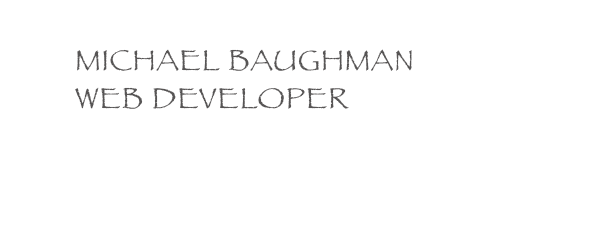
<style>
.page{position:relative;width:600px;height:250px;background:#ffffff}
.page>*{position:absolute;margin:0}
.t1{font:30px "Papyrus";letter-spacing:0.025em;color:#575555}
</style>
<div class="page">
<p class="t1" style="left:75px;top:49px;width:337px;height:60px">MICHAEL BAUGHMAN<br>WEB DEVELOPER</p>
</div>
